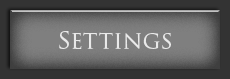
<style>
.page{position:relative;width:230px;height:79px;background:#333333}
.page>*{position:absolute;margin:0}
.t1{font:24px "TrajanPro3-Regular";color:#e9e9e9}
</style>
<div class="page">
<p class="t1" style="left:59px;top:31px;width:112px;height:18px">Settings</p>
</div>
